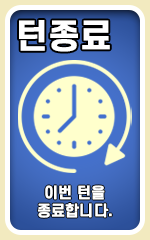
<style>
.page{position:relative;width:150px;height:240px}
.page>*{position:absolute;margin:0}
.t1{font:32.7px "S-CoreDream-6Bold";color:#ffffff;font-weight:bold}
.t2{font:14.6px/17.9px "S-CoreDream-6Bold";color:#ffffff;font-weight:bold}
</style>
<div class="page">
<p class="t1" style="left:19px;top:20px;width:91px;height:32px">턴종료</p>
<p class="t2" style="left:37px;top:185px;width:75px;height:33px;text-align:center">이번 턴을<br>종료합니다.</p>
</div>
